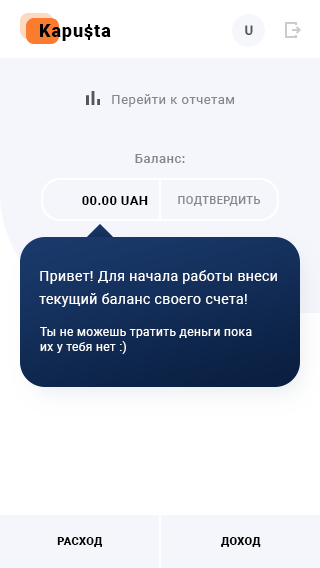
<style>
.page{position:relative;width:320px;height:568px;background:#f4f6fb}
.page>*{position:absolute;margin:0}
.t1{font:18px "Roboto-Black";letter-spacing:0.05em;color:#000000}
.t2{font:13px "Roboto-Medium";letter-spacing:0.035em;color:#52555f}
.t3{font:13px "Roboto-Regular";letter-spacing:0.04em;color:#84878e}
.t4{font:13px "Roboto-Medium";letter-spacing:0.04em;color:#84878e}
.t5{font:13px "Roboto-Bold";letter-spacing:0.03em;color:#000000}
.t6{font:11px "Roboto-Medium";letter-spacing:0.04em;color:#84878e;text-transform:uppercase}
.t7{font:14px/23px "Roboto-Regular";letter-spacing:0.03em;color:#ffffff}
.t8{font:12px/15px "Roboto-Regular";letter-spacing:0.03em;color:#ffffff}
.t9{font:11px "Roboto-Black";letter-spacing:0.03em;color:#000000;text-transform:uppercase}
</style>
<div class="page">
<p class="t1" style="left:40px;top:24px;width:71px;height:17px">Kapusta</p>
<p class="t2" style="left:245px;top:25px;width:8px;height:10px">U</p>
<p class="t3" style="left:112px;top:94px;width:122px;height:13px">Перейти к отчетам</p>
<p class="t4" style="left:135px;top:154px;width:50px;height:9px">Баланс:</p>
<p class="t5" style="left:82px;top:196px;width:66px;height:9px">00.00 UAH</p>
<p class="t6" style="left:178px;top:196px;width:83px;height:10px">подтвердить</p>
<p class="t7" style="left:39px;top:270px;width:238px;height:37px">Привет! Для начала работы внеси текущий баланс своего счета!</p>
<p class="t8" style="left:40px;top:327px;width:212px;height:27px">Ты не можешь тратить деньги пока <br>их у тебя нет :)</p>
<p class="t9" style="left:57px;top:537px;width:46px;height:10px">Расход</p>
<p class="t9" style="left:221px;top:537px;width:40px;height:10px">доход</p>
</div>
